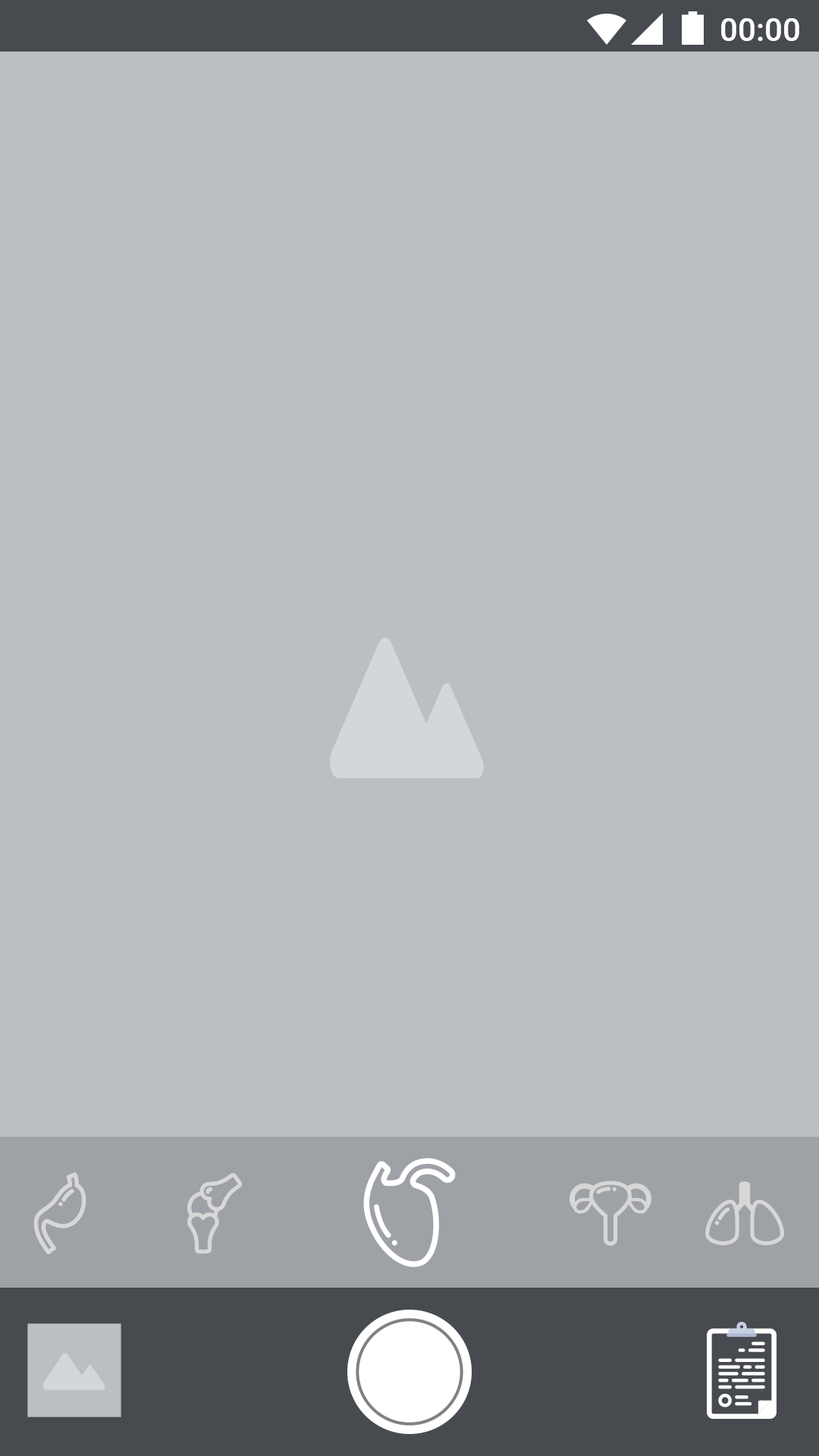
<style>
.page{position:relative;width:819px;height:1456px;background:#bbbfc4}
.page>*{position:absolute;margin:0}
.t1{font:31.8px "Roboto-Medium";color:#ffffff}
</style>
<div class="page">
<p class="t1" style="left:721px;top:18px;width:78px;height:23px">00:00</p>
</div>
